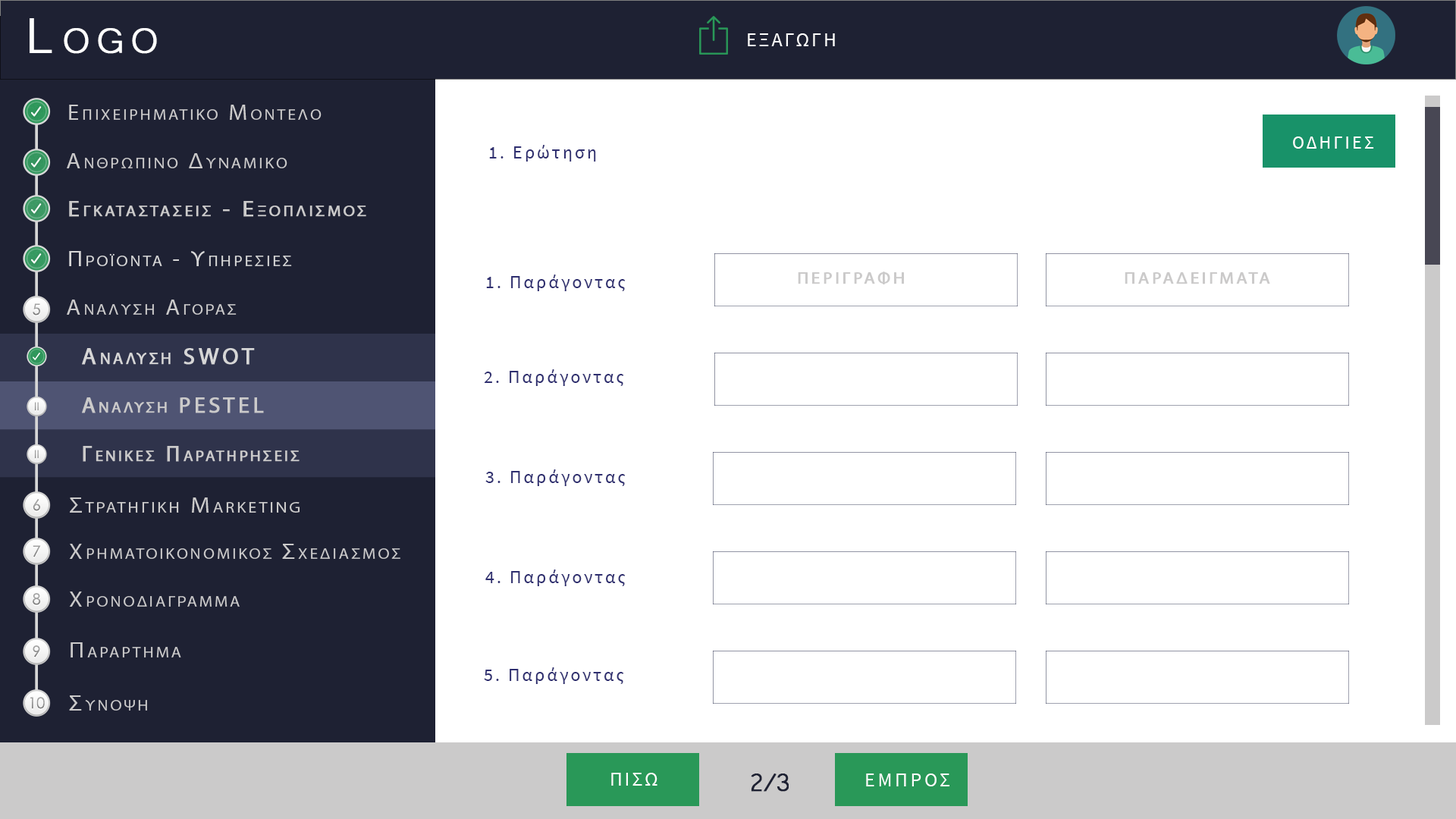
<style>
.page{position:relative;width:1456px;height:819px;background:#ffffff}
.page>*{position:absolute;margin:0}
.t1{font:63.7px "Microsoft-Yi-Baiti";letter-spacing:0.13em;color:#ffffff;font-variant:small-caps;font-weight:bold}
.t2{font:20px "SourceSansPro-Regular";letter-spacing:0.1em;color:#fefefe;text-transform:uppercase}
.t3{font:18.2px "SourceSansPro-Regular";letter-spacing:0.13em;color:#ffffff;text-transform:uppercase}
.t4{font:18.2px "SourceSansPro-Regular";letter-spacing:0.13em;color:#2f2f70}
.t5{font:18.2px "SourceSansPro-Regular";letter-spacing:0.13em;color:#2f2f70;text-transform:uppercase}
.t6{font:23.7px "MyriadPro-Regular";letter-spacing:0.13em;color:#cbcaca;font-variant:small-caps;font-weight:bold;scale:1.08 1}
.t7{font:32.8px "Microsoft-Yi-Baiti";letter-spacing:-0.1em;color:#1e2133;font-weight:bold}
.t8{font:20px "SourceSansPro-Regular";letter-spacing:0.13em;color:#fefefe;text-transform:uppercase}
</style>
<div class="page">
<p class="t1" style="left:30px;top:18px;width:127px;height:36px">Logo</p>
<p class="t2" style="left:748px;top:33px;width:87px;height:13px">εξαγωγη</p>
<p class="t3" style="left:1293px;top:136px;width:81px;height:13px">Οδηγιεσ</p>
<p class="t4" style="left:489px;top:145px;width:107px;height:17px"><span class="t5">1. </span>Ερώτηση</p>
<p class="t4" style="left:486px;top:275px;width:140px;height:16px"><span class="t5">1. </span>Παράγοντας</p>
<p class="t6" style="left:798px;top:271px;width:106px;height:13px">περιγραφη</p>
<p class="t6" style="left:1125px;top:272px;width:145px;height:12px">παραδείγματα</p>
<p class="t4" style="left:484px;top:369px;width:140px;height:17px"><span class="t5">2. </span>Παράγοντας</p>
<p class="t4" style="left:485px;top:469px;width:141px;height:17px"><span class="t5">3. </span>Παράγοντας</p>
<p class="t4" style="left:485px;top:570px;width:141px;height:16px"><span class="t5">4. </span>Παράγοντας</p>
<p class="t4" style="left:484px;top:667px;width:140px;height:17px"><span class="t5">5. </span>Παράγοντας</p>
<p class="t2" style="left:611px;top:773px;width:46px;height:13px">Πισω</p>
<p class="t7" style="left:751px;top:773px;width:38px;height:19px">2/3</p>
<p class="t8" style="left:866px;top:773px;width:83px;height:13px">εμπροσ</p>
</div>
